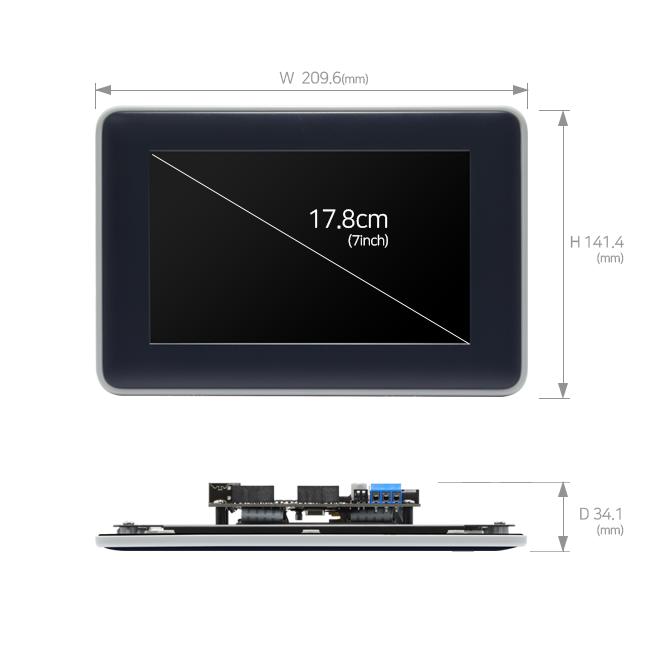
<style>
.page{position:relative;width:650px;height:650px;background:#ffffff}
.page>*{position:absolute;margin:0}
.t1{font:16px "NanumSquareR";letter-spacing:-0.03em;color:#939393}
.t2{font:12px "NanumSquareR";letter-spacing:-0.03em;color:#939393}
.t3{font:14px/18px "NanumSquareR";letter-spacing:-0.03em;color:#ffffff}
.t4{font:25px/18px "NanumSquareR";letter-spacing:-0.03em;color:#ffffff}
.t5{font:16px/15px "NanumSquareR";letter-spacing:-0.03em;color:#939393}
.t6{font:12px/15px "NanumSquareR";letter-spacing:-0.03em;color:#939393}
</style>
<div class="page">
<p class="t1" style="left:279px;top:71px;width:89px;height:15px">W  209.6<span class="t2">(mm)</span></p>
<p class="t3" style="left:310px;top:209px;width:78px;height:39px;text-align:right"><span class="t4">17.8cm<br></span>(7inch)</p>
<p class="t5" style="left:570px;top:235px;width:54px;height:30px;text-align:right">H 141.4<br><span class="t6">(mm)</span></p>
<p class="t5" style="left:580px;top:507px;width:44px;height:30px;text-align:right">D 34.1<br><span class="t6">(mm)</span></p>
</div>
